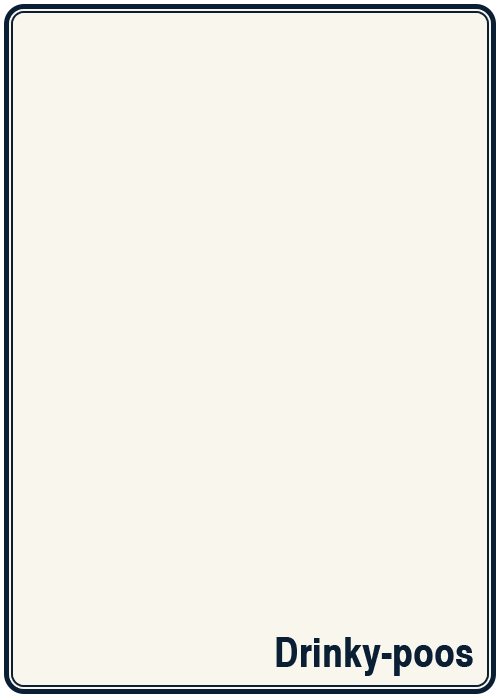
<style>
.page{position:relative;width:500px;height:700px;background:#f8f6ed}
.page>*{position:absolute;margin:0}
.t1{font:41.8px "Helvetica-Narrow-Bold";color:#0a1e34}
</style>
<div class="page">
<p class="t1" style="left:276px;top:637px;width:197px;height:39px">Drinky-poos</p>
</div>
